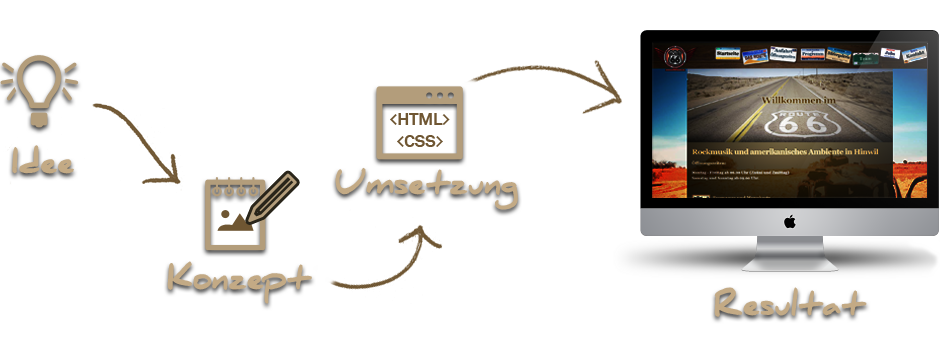
<style>
.page{position:relative;width:940px;height:350px;background:#ffffff}
.page>*{position:absolute;margin:0}
.t1{font:17px "Akkurat-Bold";letter-spacing:-0.015em;color:#6f5632}
.t2{font:30px "DanielBlack";letter-spacing:-0.015em;color:#c4aa86}
</style>
<div class="page">
<p class="t1" style="left:390px;top:113px;width:60px;height:12px">&lt;HTML&gt;</p>
<p class="t1" style="left:397px;top:135px;width:46px;height:12px">&lt;CSS&gt;</p>
<p class="t2" style="left:12px;top:145px;width:62px;height:29px">Idee</p>
<p class="t2" style="left:335px;top:167px;width:183px;height:43px">Umsetzung</p>
<p class="t2" style="left:167px;top:261px;width:145px;height:43px">Konzept</p>
<p class="t2" style="left:714px;top:287px;width:153px;height:30px">Resultat</p>
</div>
